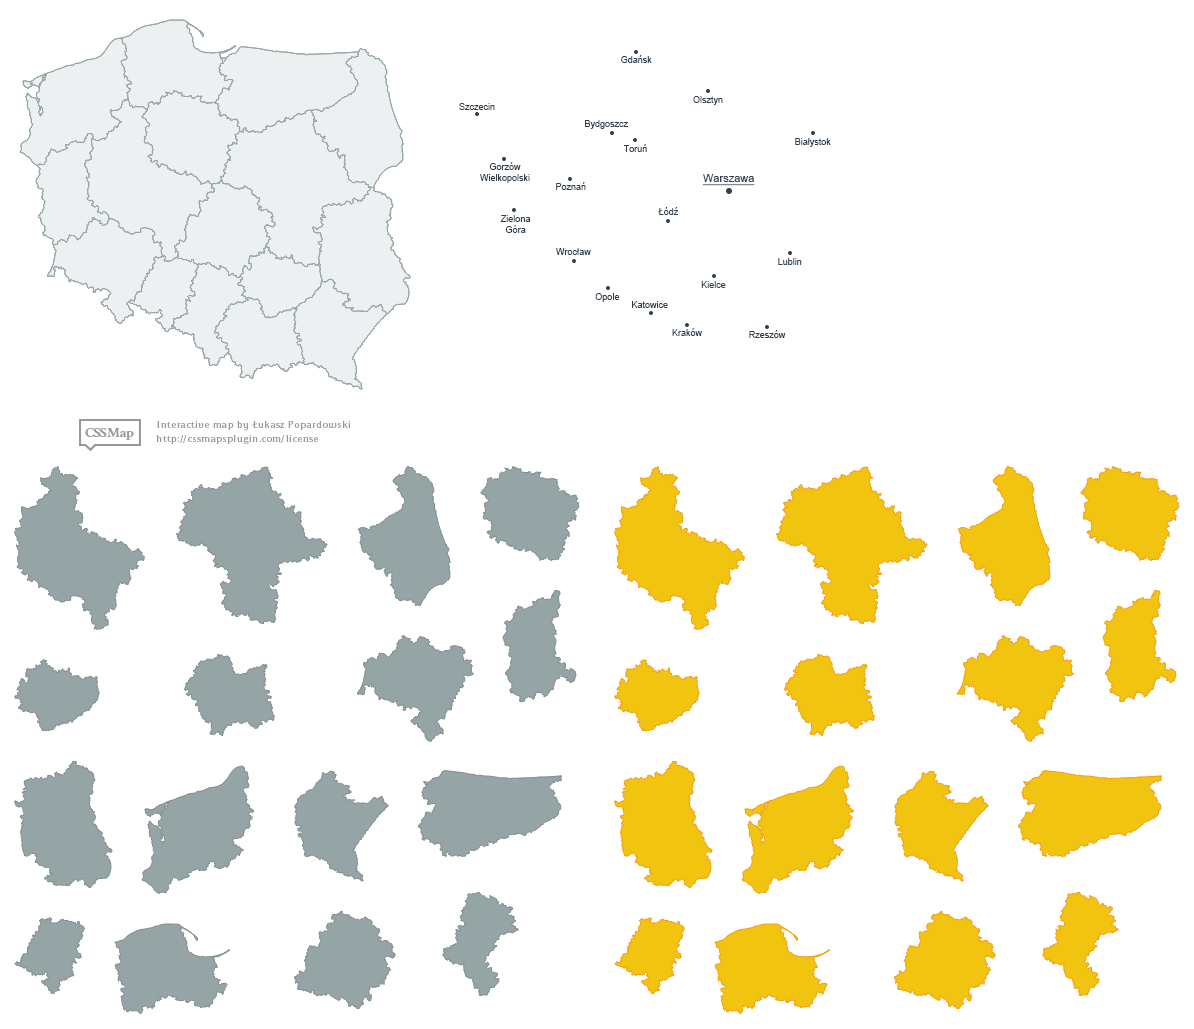
<style>
.page{position:relative;width:1194px;height:1029px;background:#ffffff}
.page>*{position:absolute;margin:0}
.t1{font:9px "ArialMT";color:#2c3e50}
.t2{font:11px "ArialMT";color:#2c3e50;text-decoration:underline}
</style>
<div class="page">
<p class="t1" style="left:621px;top:55px;width:31px;height:8px">Gdańsk</p>
<p class="t1" style="left:693px;top:96px;width:30px;height:9px">Olsztyn</p>
<p class="t1" style="left:459px;top:103px;width:36px;height:7px">Szczecin</p>
<p class="t1" style="left:585px;top:120px;width:43px;height:9px">Bydgoszcz</p>
<p class="t1" style="left:623px;top:144px;width:24px;height:8px">Toruń</p>
<p class="t1" style="left:795px;top:138px;width:36px;height:9px">Białystok</p>
<p class="t1" style="left:480px;top:162px;width:50px;height:21px;text-align:center">Gorzów<br>Wielkopolski</p>
<p class="t2" style="left:702px;top:174px;width:53px;height:12px">Warszawa</p>
<p class="t1" style="left:556px;top:182px;width:30px;height:8px">Poznań</p>
<p class="t1" style="left:658px;top:207px;width:21px;height:8px">Łódź</p>
<p class="t1" style="left:500px;top:215px;width:31px;height:18px;text-align:center">Zielona<br>Góra</p>
<p class="t1" style="left:556px;top:248px;width:35px;height:7px">Wrocław</p>
<p class="t1" style="left:778px;top:258px;width:24px;height:7px">Lublin</p>
<p class="t1" style="left:701px;top:281px;width:25px;height:7px">Kielce</p>
<p class="t1" style="left:595px;top:293px;width:25px;height:9px">Opole</p>
<p class="t1" style="left:632px;top:301px;width:36px;height:7px">Katowice</p>
<p class="t1" style="left:672px;top:328px;width:30px;height:8px">Kraków</p>
<p class="t1" style="left:749px;top:330px;width:37px;height:8px">Rzeszów</p>
</div>
